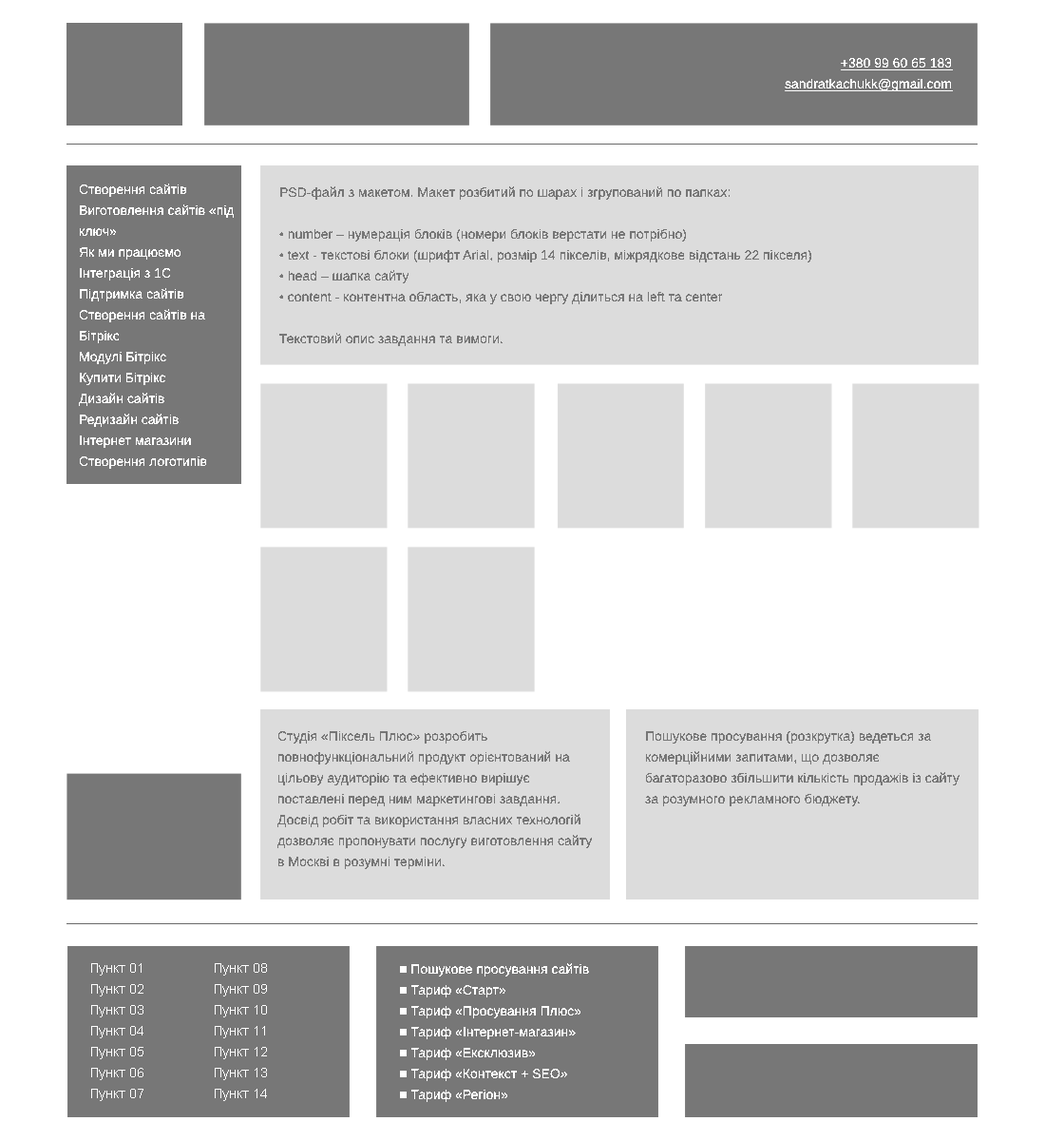
<style>
.page{position:relative;width:1045px;height:1141px;background:#ffffff}
.page>*{position:absolute;margin:0}
.t1{font:13.3px/20.9px "ArialMT";color:#ffffff;text-decoration:underline}
.t2{font:13.3px/20.9px "ArialMT";color:#ffffff}
.t3{font:13.3px/20.9px "ArialMT";color:#777777}
</style>
<div class="page">
<p class="t1" style="left:784px;top:58px;width:169px;height:34px;text-align:right">+380 99 60 65 183<br>sandratkachukk@gmail.com</p>
<p class="t2" style="left:79px;top:183px;width:156px;height:286px">Створення сайтів<br>Виготовлення сайтів «під ключ»<br>Як ми працюємо<br>Інтеграція з 1С<br>Підтримка сайтів<br>Створення сайтів на Бітрікс<br>Модулі Бітрікс<br>Купити Бітрікс<br>Дизайн сайтів<br>Редизайн сайтів<br>Інтернет магазини<br>Створення логотипів<br>FAQ</p>
<p class="t3" style="left:279px;top:186px;width:533px;height:160px">PSD-файл з макетом. Макет розбитий по шарах і згрупований по папках:<br><br>• number – нумерація блоків (номери блоків верстати не потрібно)<br>• text - текстові блоки (шрифт Arial, розмір 14 пікселів, міжрядкове відстань 22 пікселя)<br>• head – шапка сайту<br>• content - контентна область, яка у свою чергу ділиться на left та center<br><br>Текстовий опис завдання та вимоги.</p>
<p class="t3" style="left:278px;top:730px;width:315px;height:139px">Студія «Піксель Плюс» розробить повнофункціональний продукт орієнтований на цільову аудиторію та ефективно вирішує поставлені перед ним маркетингові завдання. Досвід робіт та використання власних технологій дозволяє пропонувати послугу виготовлення сайту в Москві в розумні терміни.</p>
<p class="t3" style="left:645px;top:730px;width:315px;height:76px">Пошукове просування (розкрутка) ведеться за комерційними запитами, що дозволяє багаторазово збільшити кількість продажів із сайту за розумного рекламного бюджету.</p>
<p class="t2" style="left:91px;top:963px;width:53px;height:138px">Пункт 01<br>Пункт 02<br>Пункт 03<br>Пункт 04<br>Пункт 05<br>Пункт 06<br>Пункт 07</p>
<p class="t2" style="left:215px;top:963px;width:52px;height:138px">Пункт 08<br>Пункт 09<br>Пункт 10<br>Пункт 11<br>Пункт 12<br>Пункт 13<br>Пункт 14</p>
<p class="t2" style="left:399px;top:963px;width:190px;height:139px">■ Пошукове просування сайтів<br>■ Тариф «Старт»<br>■ Тариф «Просування Плюс»<br>■ Тариф «Інтернет-магазин»<br>■ Тариф «Ексклюзив»<br>■ Тариф «Контекст + SEO»<br>■ Тариф «Регіон»</p>
</div>
